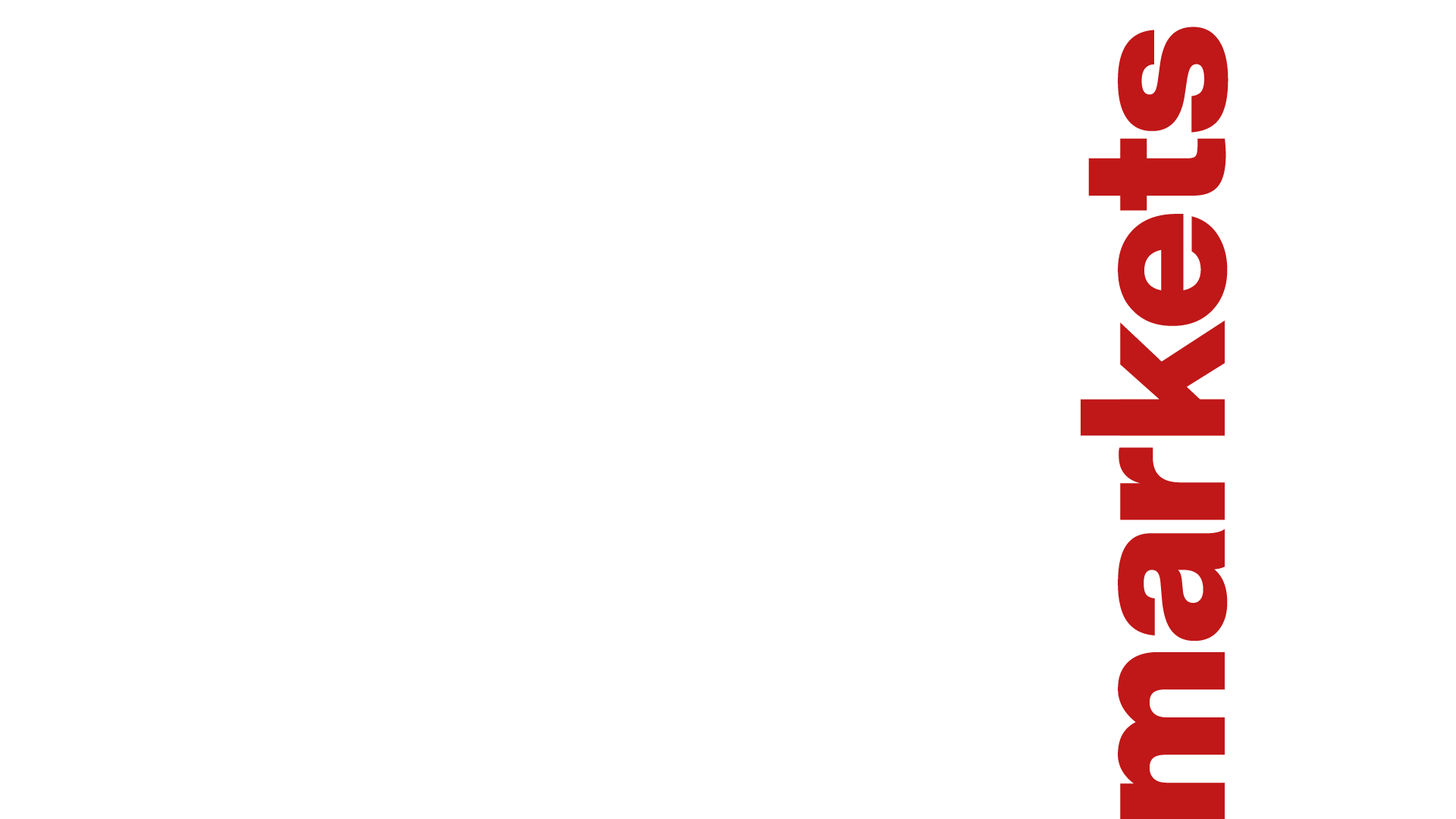
<style>
.page{position:relative;width:1456px;height:819px;background:#ffffff}
.page>*{position:absolute;margin:0}
.t1{font:202.2px "HelveticaNowDisplay-Black";color:#c01718}
</style>
<div class="page">
<p class="t1" style="left:1081px;top:27px;width:147px;height:794px;rotate:-90deg">markets</p>
</div>
